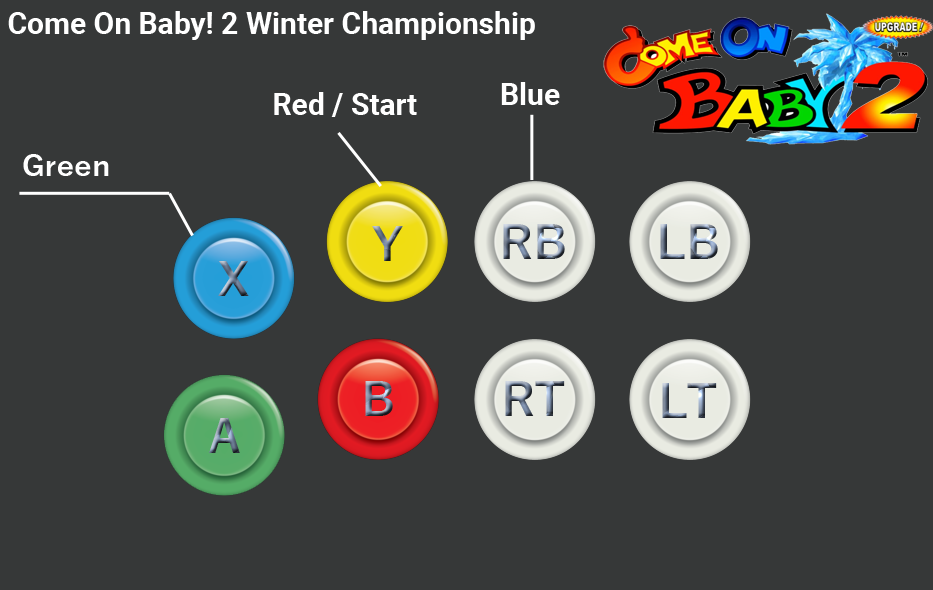
<style>
.page{position:relative;width:933px;height:590px;background:#363838}
.page>*{position:absolute;margin:0}
.t1{font:30px "Roboto-Bold";color:#ffffff}
.t2{font:30px "YuGothic-Bold";color:#ffffff}
</style>
<div class="page">
<p class="t1" style="left:8px;top:11px;width:527px;height:29px">Come On Baby! 2 Winter Championship</p>
<p class="t1" style="left:501px;top:82px;width:59px;height:23px">Blue</p>
<p class="t1" style="left:274px;top:92px;width:143px;height:25px">Red / Start</p>
<p class="t2" style="left:23px;top:154px;width:86px;height:22px">Green</p>
</div>
